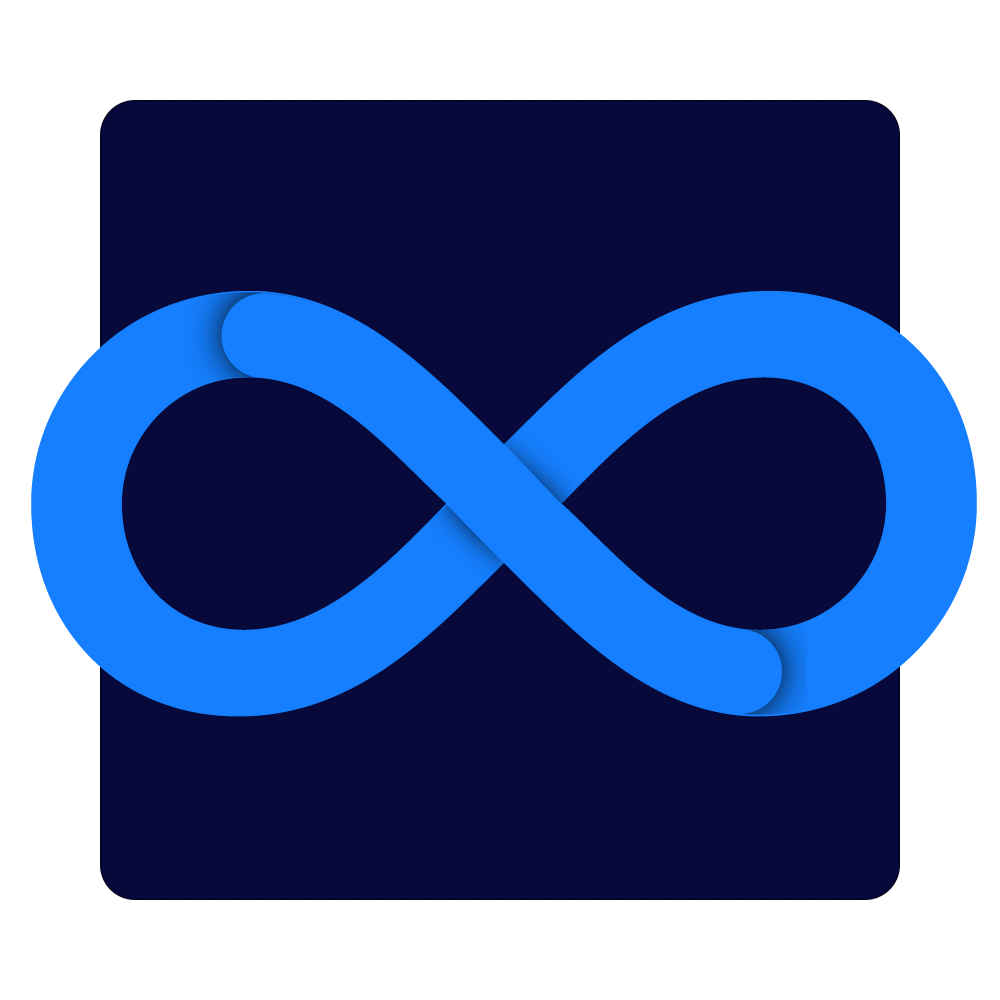
<style>
.page{position:relative;width:1000px;height:1000px;background:#060939}
.page>*{position:absolute;margin:0}
.t1{font:1436.8px "MyriadPro-Regular";color:#157fff}
</style>
<div class="page">
<p class="t1" style="left:31px;top:291px;width:946px;height:426px">∞</p>
</div>
